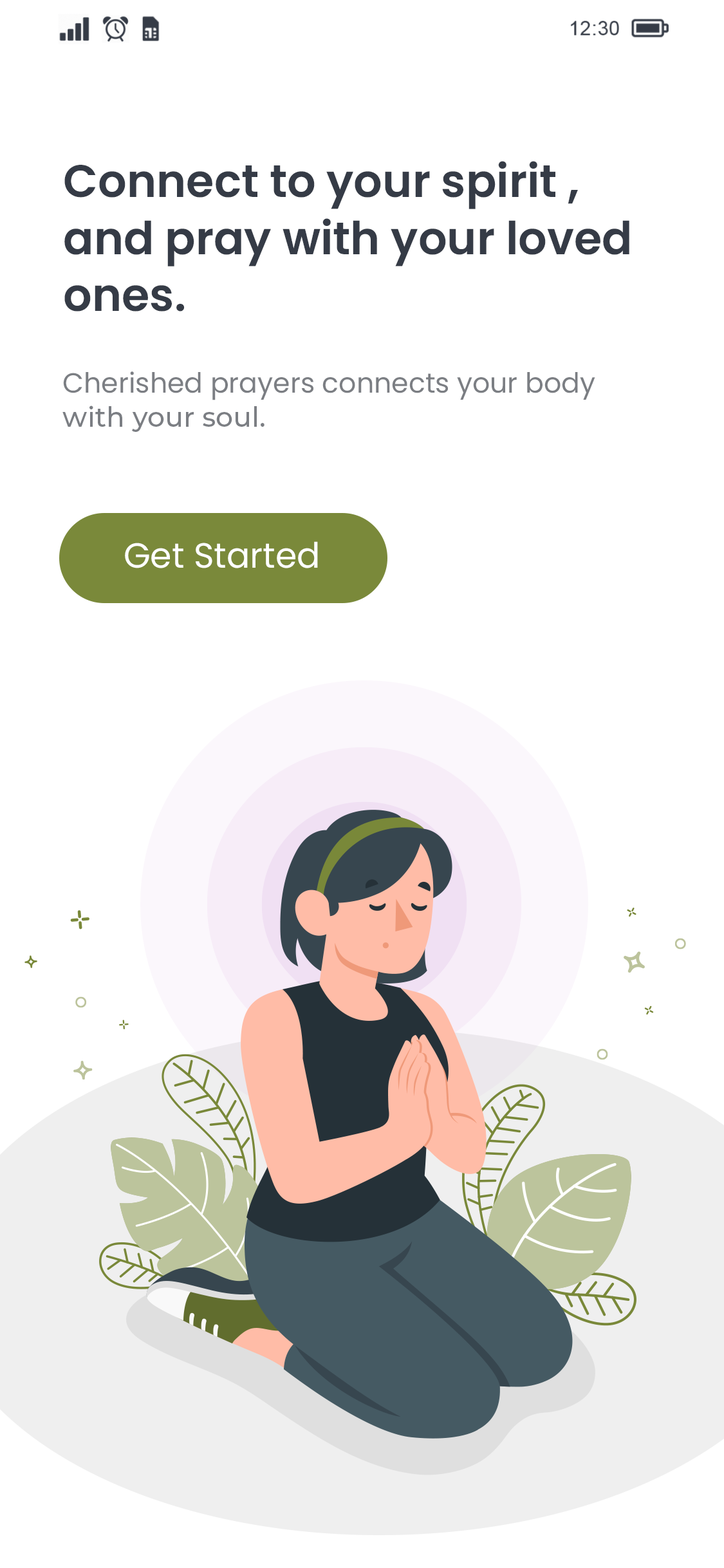
<style>
.page{position:relative;width:724px;height:1568px;background:#ffffff}
.page>*{position:absolute;margin:0}
.t1{font:45.6px/56.9px "Poppins-SemiBold";color:#353b46}
.t2{font:27.8px/34.2px "Poppins-Regular";color:#7b7e83}
.t3{font:27.8px/34.2px "Montserrat-Medium";color:#7b7e83}
.t4{font:35px "Poppins-Regular";color:#ffffff}
</style>
<div class="page">
<p class="t1" style="left:64px;top:161px;width:566px;height:151px">Connect to your spirit , <br>and pray with your loved <br>ones.</p>
<p class="t2" style="left:62px;top:371px;width:533px;height:61px">Cherished prayers connects your body<br><span class="t3">with your soul.</span></p>
<p class="t4" style="left:125px;top:541px;width:193px;height:27px">Get Started</p>
</div>
